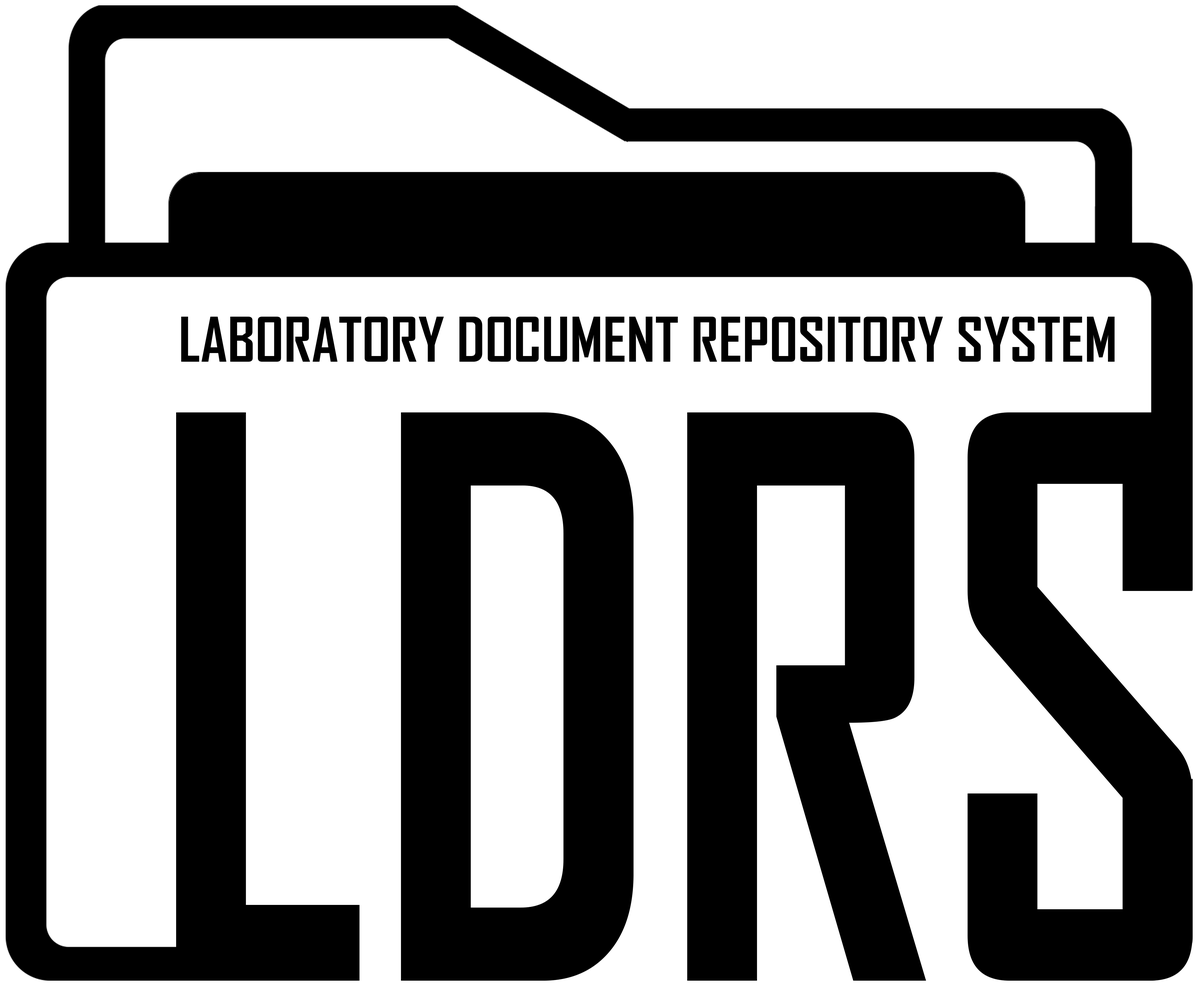
<style>
.page{position:relative;width:1201px;height:993px;background:#ffffff}
.page>*{position:absolute;margin:0}
.t1{font:59.1px "AgencyFB-Bold";color:#000000}
.t2{font:743.5px "AgencyFB-Bold";color:#000000;scale:0.82 1}
</style>
<div class="page">
<p class="t1" style="left:181px;top:317px;width:934px;height:45px">LABORATORY DOCUMENT REPOSITORY SYSTEM</p>
<p class="t2" style="left:176px;top:412px;width:1017px;height:569px">LDRS</p>
</div>
